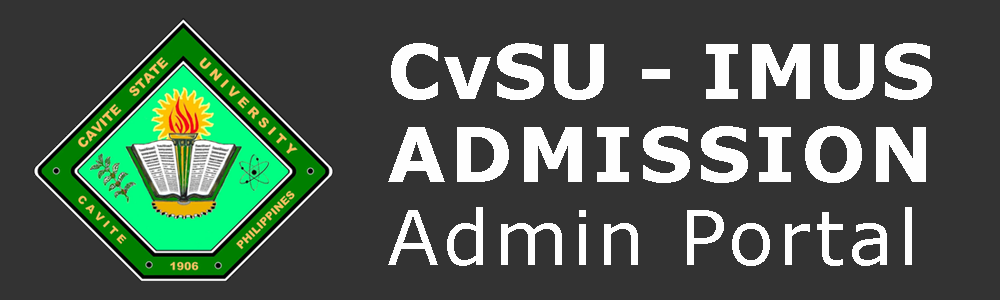
<style>
.page{position:relative;width:1000px;height:300px;background:#333333}
.page>*{position:absolute;margin:0}
.t1{font:76.4px/83.3px "Verdana";letter-spacing:0.05em;color:#fefefe}
.t2{font:76.4px/83.3px "Verdana-Bold";letter-spacing:0.01em;color:#fefefe}
.t3{font:76.4px/83.3px "Verdana-Bold";letter-spacing:0.05em;color:#fefefe}
</style>
<div class="page">
<p class="t1" style="left:388px;top:43px;width:544px;height:223px"><span class="t2">CvSU - IMUS </span><span class="t3">ADMISSION<br></span>Admin Portal</p>
</div>
